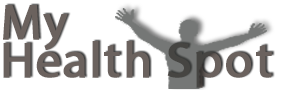
<style>
.page{position:relative;width:290px;height:90px;background:#ffffff}
.page>*{position:absolute;margin:0}
.t1{font:50px/37.5px "MyriadPro-Regular";letter-spacing:0.025em;color:#6b625e;font-weight:bold}
</style>
<div class="page">
<p class="t1" style="left:3px;top:5px;width:269px;height:83px">My<br>Health Spot</p>
</div>
